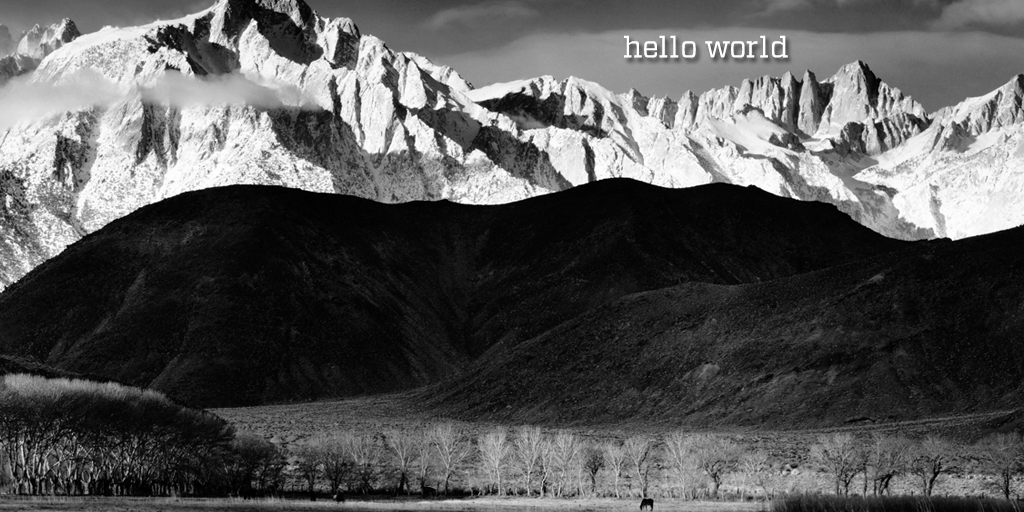
<style>
.page{position:relative;width:1024px;height:512px}
.page>*{position:absolute;margin:0}
.t1{font:29.8px "Vitesse-Book";color:#ffffff}
</style>
<div class="page">
<p class="t1" style="left:624px;top:35px;width:164px;height:23px">hello world</p>
</div>
